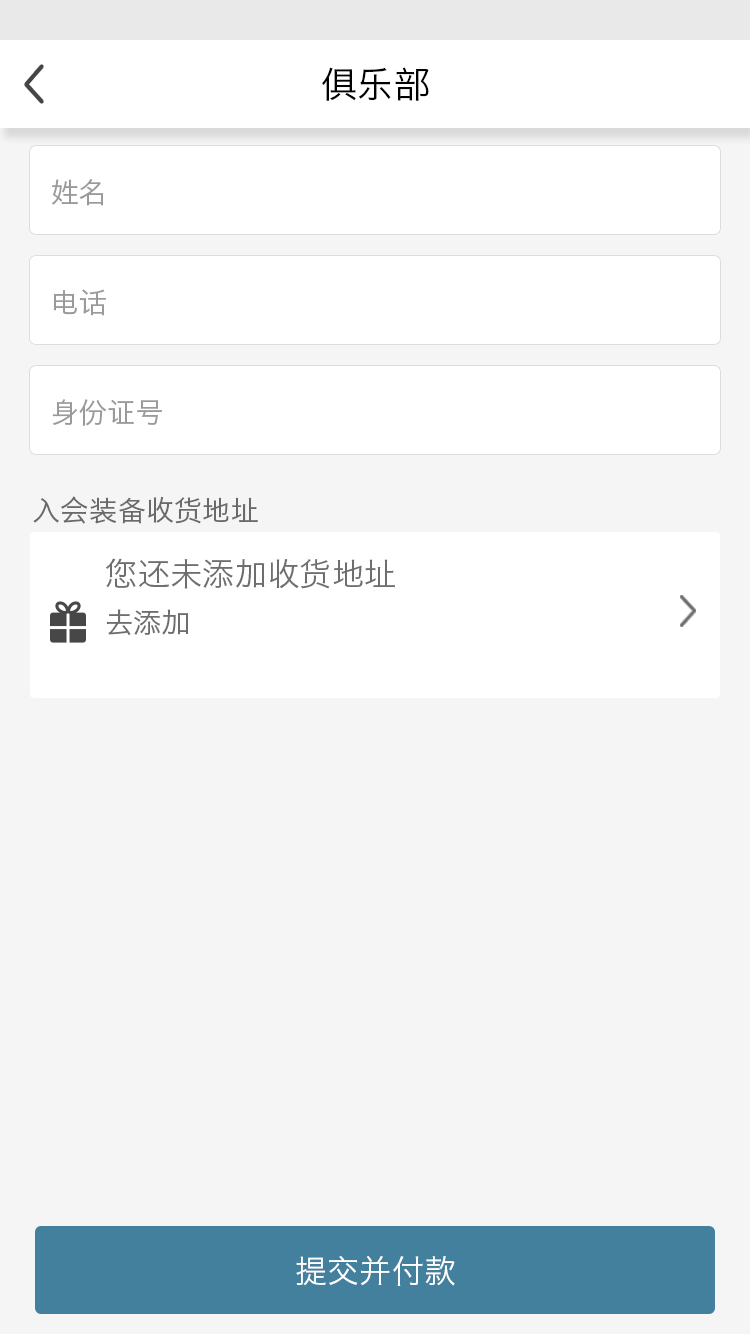
<style>
.page{position:relative;width:750px;height:1334px;background:#f5f5f5}
.page>*{position:absolute;margin:0}
.t1{font:36px "HiraginoSansGB-W3";color:#000000}
.t2{font:28px "HiraginoSansGB-W3";color:#9a9a9a}
.t3{font:28px "HiraginoSansGB-W3";color:#6a6a6a}
.t4{font:32px "HiraginoSansGB-W3";color:#6e6e6e}
.t5{font:28px "HiraginoSansGB-W3";color:#6e6e6e}
.t6{font:32px "HiraginoSansGB-W3";color:#ffffff}
</style>
<div class="page">
<p class="t1" style="left:322px;top:67px;width:107px;height:34px">俱乐部</p>
<p class="t2" style="left:51px;top:179px;width:53px;height:27px">姓名</p>
<p class="t2" style="left:53px;top:289px;width:53px;height:27px">电话</p>
<p class="t2" style="left:52px;top:399px;width:110px;height:27px">身份证号</p>
<p class="t3" style="left:33px;top:496px;width:225px;height:28px">入会装备收货地址</p>
<p class="t4" style="left:105px;top:558px;width:290px;height:31px">您还未添加收货地址</p>
<p class="t5" style="left:106px;top:609px;width:83px;height:27px">去添加</p>
<p class="t6" style="left:296px;top:1256px;width:159px;height:30px">提交并付款</p>
</div>
